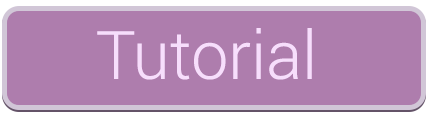
<style>
.page{position:relative;width:428px;height:115px;background:#ae7dad}
.page>*{position:absolute;margin:0}
.t1{font:66.7px "Roboto-Light";color:#f7defc}
</style>
<div class="page">
<p class="t1" style="left:97px;top:28px;width:215px;height:52px">Tutorial</p>
</div>
